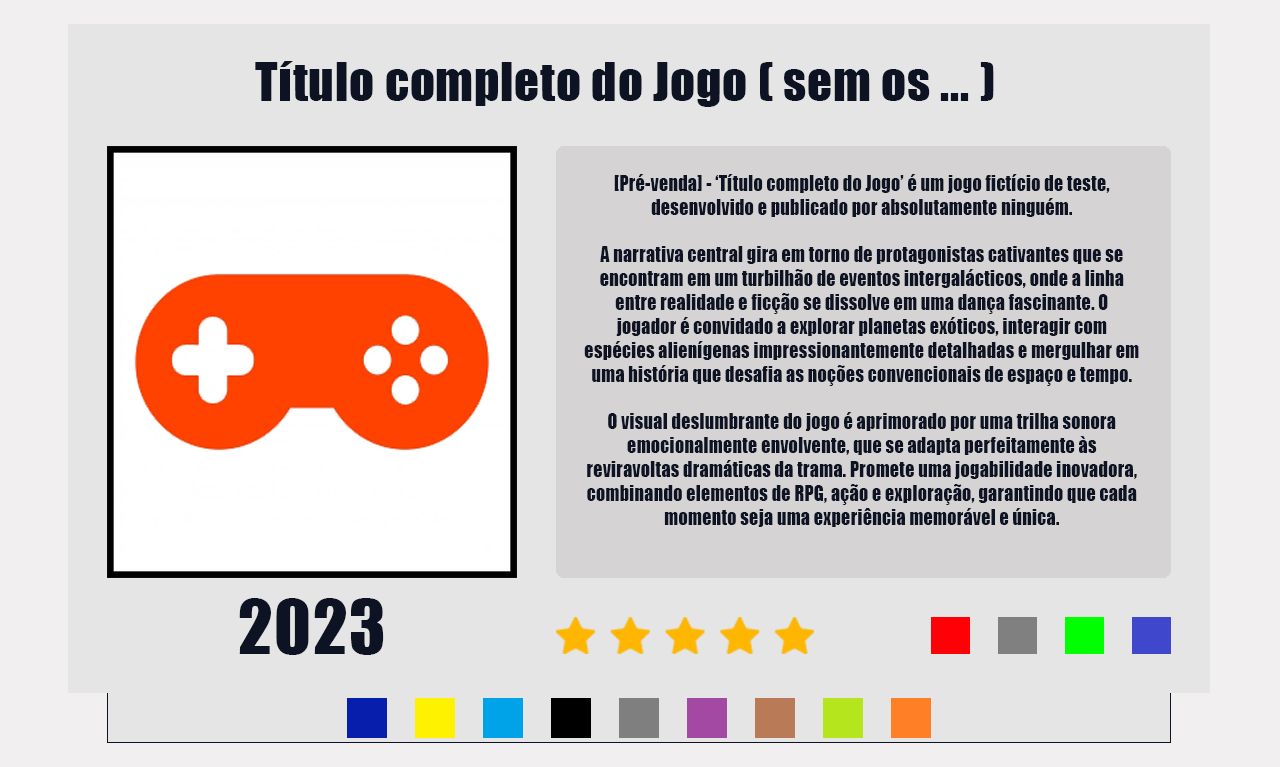
<style>
.page{position:relative;width:1280px;height:767px;background:#e5e5e5}
.page>*{position:absolute;margin:0}
.t1{font:48.6px "Impact";letter-spacing:0.02em;color:#0d1323}
.t2{font:19.9px "Impact";letter-spacing:0.02em;color:#0d1323;scale:0.9 1}
.t3{font:69.4px "Impact";letter-spacing:0.02em;color:#0d1323}
</style>
<div class="page">
<p class="t1" style="left:255px;top:61px;width:739px;height:46px">Título completo do Jogo ( sem os ... )</p>
<p class="t2" style="left:584px;top:174px;width:555px;height:353px;text-align:center">[Pré-venda] - ‘Título completo do Jogo’ é um jogo fictício de teste, desenvolvido e publicado por absolutamente ninguém. <br><br>A narrativa central gira em torno de protagonistas cativantes que se encontram em um turbilhão de eventos intergalácticos, onde a linha entre realidade e ficção se dissolve em uma dança fascinante. O jogador é convidado a explorar planetas exóticos, interagir com espécies alienígenas impressionantemente detalhadas e mergulhar em uma história que desafia as noções convencionais de espaço e tempo.<br><br>O visual deslumbrante do jogo é aprimorado por uma trilha sonora emocionalmente envolvente, que se adapta perfeitamente às reviravoltas dramáticas da trama. Promete uma jogabilidade inovadora, combinando elementos de RPG, ação e exploração, garantindo que cada momento seja uma experiência memorável e única.</p>
<p class="t3" style="left:239px;top:598px;width:145px;height:57px">2023</p>
</div>
